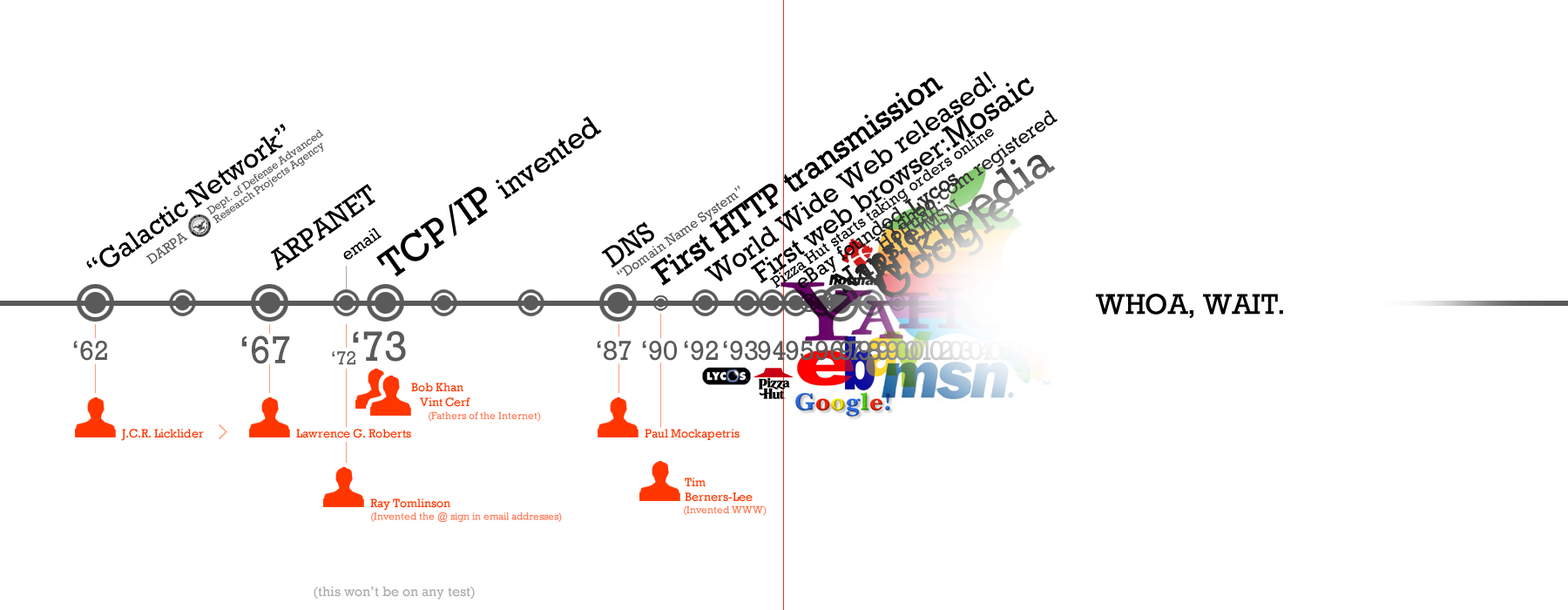
<style>
.page{position:relative;width:1568px;height:610px;background:#ffffff}
.page>*{position:absolute;margin:0}
.t1{font:32.9px "Rockwell";color:#000000}
.t2{font:27.9px "Rockwell";color:#000000}
.t3{font:32.2px "Rockwell";color:#000000}
.t4{font:20.7px "Rockwell"}
.t5{font:30.3px "Rockwell";color:#000000}
.t6{font:40.4px "Rockwell";color:#000000}
.t7{font:11.3px/10.5px "Rockwell";color:#575757}
.t8{font:47.4px "Rockwell"}
.t9{font:22.2px "Rockwell";color:#303030}
.t10{font:20.7px "Rockwell";color:#000000}
.t11{font:20.7px "Rockwell";color:#424242}
.t12{font:19.6px "Rockwell";color:#6a6a6a}
.t13{font:32.1px "Rockwell"}
.t14{font:13.9px "Rockwell";color:#575757}
.t15{font:17.3px "Rockwell";color:#000000}
.t16{font:29.1px "Rockwell";color:#000000}
.t17{font:27.9px "Rockwell";color:#5a5a5a}
.t18{font:39.4px "Rockwell";color:#5a5a5a}
.t19{font:43px "Rockwell";color:#5a5a5a}
.t20{font:27.9px "Rockwell";letter-spacing:-0.2em}
.t21{font:27.9px "Rockwell"}
.t22{font:27.9px "Rockwell";letter-spacing:-0.18em;color:#efefef}
.t23{font:19.2px "Rockwell";color:#5a5a5a}
.t24{font:12.2px "Rockwell";color:#ff3600}
.t25{font:10.5px "Rockwell";color:#ff6f48}
.t26{font:13.9px "Rockwell";color:#acacac}
</style>
<div class="page">
<p class="t1" style="left:650px;top:78px;width:293px;height:208px;rotate:-35deg">First HTTP transmission</p>
<p class="t2" style="left:704px;top:71px;width:293px;height:210px;rotate:-35deg">World Wide Web released!</p>
<p class="t3" style="left:941px;top:78px;width:93px;height:70px;rotate:-35deg">Mosaic</p>
<p class="t4" style="left:882px;top:110px;width:176px;height:127px;rotate:-35deg">Yahoo.com registered</p>
<p class="t2" style="left:86px;top:124px;width:200px;height:144px;rotate:-35deg">“Galactic Network”</p>
<p class="t5" style="left:376px;top:116px;width:226px;height:161px;rotate:-35deg"><span class="t6">TCP/IP </span>invented</p>
<p class="t7" style="left:206px;top:129px;width:118px;height:95px;rotate:-35deg">Dept. of Defense Advanced <br>Research Projects Agency</p>
<p class="t2" style="left:750px;top:139px;width:201px;height:144px;rotate:-35deg">First web browser:</p>
<p class="t8" style="left:855px;top:154px;width:201px;height:137px;rotate:-35deg">Wikipedia</p>
<p class="t9" style="left:904px;top:173px;width:55px;height:42px;rotate:-35deg">Lycos</p>
<p class="t2" style="left:270px;top:184px;width:105px;height:87px;rotate:-35deg">ARPANET</p>
<p class="t10" style="left:798px;top:206px;width:107px;height:82px;rotate:-35deg">eBay founded</p>
<p class="t11" style="left:875px;top:199px;width:66px;height:53px;rotate:-35deg">Hotmail</p>
<p class="t12" style="left:922px;top:199px;width:39px;height:34px;rotate:-35deg">MSN</p>
<p class="t2" style="left:601px;top:221px;width:53px;height:47px;rotate:-35deg">DNS</p>
<p class="t13" style="left:830px;top:218px;width:102px;height:77px;rotate:-35deg">Napster</p>
<p class="t14" style="left:145px;top:233px;width:43px;height:32px;rotate:-35deg">DARPA</p>
<p class="t15" style="left:343px;top:227px;width:39px;height:33px;rotate:-35deg">email</p>
<p class="t16" style="left:1096px;top:294px;width:187px;height:24px">WHOA, WAIT.</p>
<p class="t17" style="left:73px;top:341px;width:34px;height:20px">‘62</p>
<p class="t18" style="left:241px;top:335px;width:49px;height:29px">‘67</p>
<p class="t19" style="left:353px;top:331px;width:53px;height:31px">‘73</p>
<p class="t17" style="left:597px;top:341px;width:35px;height:20px">‘87</p>
<p class="t17" style="left:642px;top:341px;width:35px;height:20px">‘90</p>
<p class="t17" style="left:684px;top:341px;width:34px;height:20px">‘92</p>
<p class="t17" style="left:723px;top:341px;width:35px;height:20px">‘93</p>
<p class="t17" style="left:758px;top:341px;width:28px;height:20px">94</p>
<p class="t20" style="left:786px;top:341px;width:132px;height:20px"><span class="t21">959</span>697989900</p>
<p class="t22" style="left:910px;top:341px;width:121px;height:20px">010203040506</p>
<p class="t23" style="left:332px;top:351px;width:23px;height:14px">‘72</p>
<p class="t24" style="left:411px;top:382px;width:52px;height:10px">Bob Khan</p>
<p class="t24" style="left:420px;top:397px;width:50px;height:10px">Vint Cerf</p>
<p class="t25" style="left:429px;top:411px;width:112px;height:11px">(Fathers of the Internet)</p>
<p class="t24" style="left:121px;top:429px;width:83px;height:12px">J.C.R. Licklider</p>
<p class="t24" style="left:296px;top:429px;width:115px;height:9px">Lawrence G. Roberts</p>
<p class="t24" style="left:645px;top:429px;width:95px;height:11px">Paul Mockapetris</p>
<p class="t24" style="left:685px;top:477px;width:68px;height:24px">Tim<br>Berners-Lee</p>
<p class="t25" style="left:370px;top:498px;width:192px;height:24px"><span class="t24">Ray Tomlinson<br></span>(Invented the @ sign in email addresses)</p>
<p class="t25" style="left:684px;top:505px;width:83px;height:11px">(Invented WWW)</p>
<p class="t26" style="left:314px;top:586px;width:161px;height:13px">(this won’t be on any test)</p>
</div>
